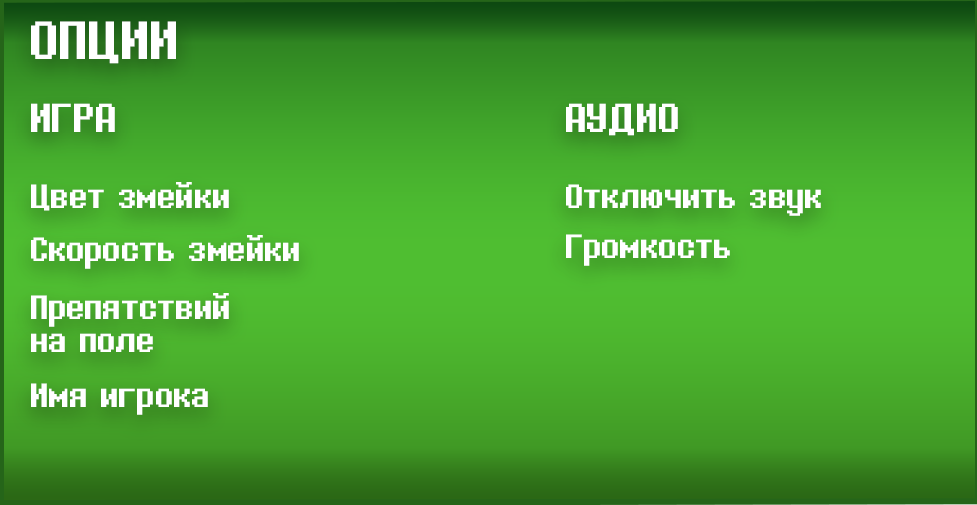
<style>
.page{position:relative;width:977px;height:505px}
.page>*{position:absolute;margin:0}
.t1{font:66.7px "Determination2";color:#ffffff}
.t2{font:50px "Determination2";color:#ffffff}
.t3{font:41.7px "Determination2";color:#ffffff}
</style>
<div class="page">
<p class="t1" style="left:31px;top:21px;width:145px;height:43px">ОПЦИИ</p>
<p class="t2" style="left:31px;top:103px;width:84px;height:29px">ИГРА</p>
<p class="t2" style="left:566px;top:103px;width:112px;height:33px">АУДИО</p>
<p class="t3" style="left:31px;top:182px;width:198px;height:29px">Цвет змейки</p>
<p class="t3" style="left:566px;top:184px;width:255px;height:32px">Отключить звук</p>
<p class="t3" style="left:31px;top:235px;width:268px;height:34px">Скорость змейки</p>
<p class="t3" style="left:566px;top:234px;width:164px;height:32px">Громкость</p>
<p class="t3" style="left:31px;top:293px;width:198px;height:34px">Препятствий</p>
<p class="t3" style="left:31px;top:333px;width:122px;height:19px">на поле</p>
<p class="t3" style="left:31px;top:383px;width:177px;height:32px">Имя игрока</p>
</div>
